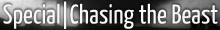
<style>
.page{position:relative;width:220px;height:30px}
.page>*{position:absolute;margin:0}
.t1{font:27px "YanoneKaffeesatz-Regular";letter-spacing:0.004em;color:#f7f7f7}
</style>
<div class="page">
<p class="t1" style="left:3px;top:1px;width:215px;height:28px">Special|Chasing the Beast</p>
</div>
